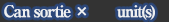
<style>
.page{position:relative;width:169px;height:22px;background:#333333}
.page>*{position:absolute;margin:0}
.t1{font:16px "RyuminPro-ExBold";letter-spacing:-0.08em;color:#edeff1}
</style>
<div class="page">
<p class="t1" style="left:4px;top:5px;width:151px;height:15px">Can sortie ×       unit(s)</p>
</div>
